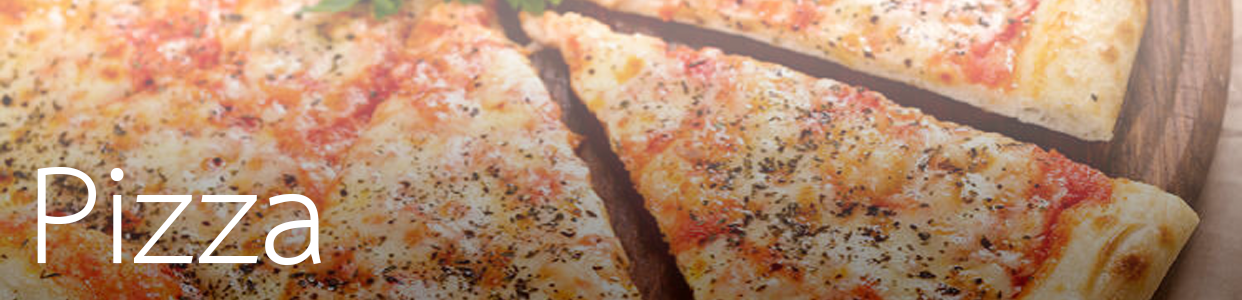
<style>
.page{position:relative;width:1242px;height:300px}
.page>*{position:absolute;margin:0}
.t1{font:200px "THSarabunNew";color:#ffffff}
</style>
<div class="page">
<p class="t1" style="left:37px;top:167px;width:284px;height:98px">Pizza</p>
</div>
